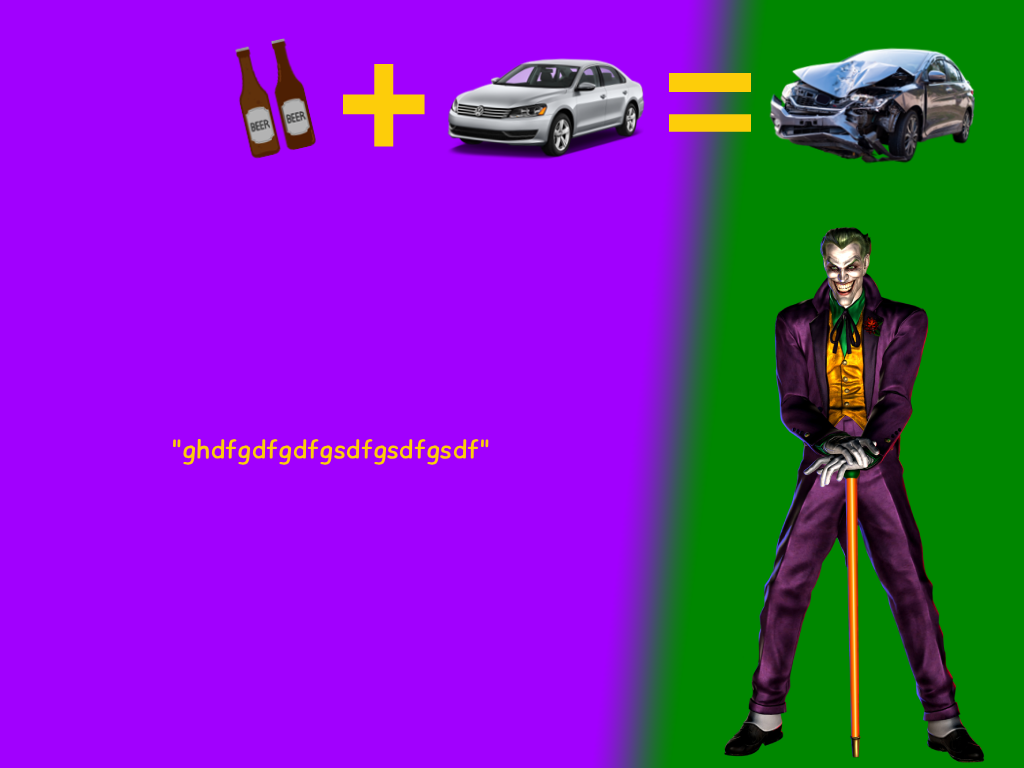
<style>
.page{position:relative;width:1024px;height:768px;background:#a100fe}
.page>*{position:absolute;margin:0}
.t1{font:24px "ComicRelief";color:#fdcd0a;font-weight:bold}
</style>
<div class="page">
<p class="t1" style="left:173px;top:439px;width:316px;height:27px">"ghdfgdfgdfgsdfgsdfgsdf"</p>
</div>
